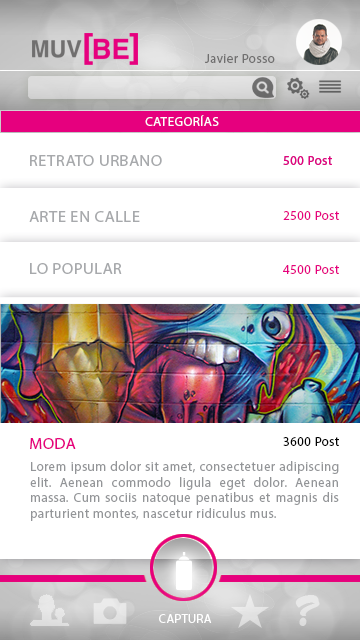
<style>
.page{position:relative;width:360px;height:640px;background:#ffffff}
.page>*{position:absolute;margin:0}
.t1{font:13px "MyriadPro-Regular";letter-spacing:0.035em;color:#706f6f}
.t2{font:13px "MyriadPro-Regular";letter-spacing:0.035em;color:#fdfdfe}
.t3{font:16.1px "MyriadPro-Regular";letter-spacing:0.035em;color:#a7a9ac}
.t4{font:13px "MyriadPro-Regular";letter-spacing:0.035em;color:#e6007e}
.t5{font:16.1px "MyriadPro-Regular";letter-spacing:0.035em;color:#e6007e}
.t6{font:13px "MyriadPro-Regular";letter-spacing:0.035em;color:#020202}
.t7{font:13px "MyriadPro-Regular";letter-spacing:0.035em;color:#939598}
.t8{font:35.4px "CandyScript";letter-spacing:0.035em;color:#ffffff}
.t9{font:12px "MyriadPro-Regular";letter-spacing:0.035em;color:#ffffff;scale:1.03 1}
</style>
<div class="page">
<p class="t1" style="left:205px;top:54px;width:70px;height:9px">Javier Posso</p>
<p class="t2" style="left:145px;top:115px;width:74px;height:11px">CATEGORÍAS</p>
<p class="t3" style="left:30px;top:155px;width:132px;height:11px">RETRATO URBANO</p>
<p class="t3" style="left:29px;top:211px;width:111px;height:11px">ARTE EN CALLE</p>
<p class="t4" style="left:283px;top:211px;width:56px;height:9px">2500 Post</p>
<p class="t3" style="left:30px;top:263px;width:92px;height:11px">LO POPULAR</p>
<p class="t4" style="left:283px;top:265px;width:56px;height:9px">4500 Post</p>
<p class="t5" style="left:30px;top:438px;width:46px;height:11px">MODA</p>
<p class="t6" style="left:283px;top:437px;width:56px;height:9px">3600 Post</p>
<p class="t7" style="left:30px;top:461px;width:309px;height:60px;text-align:justify">Lorem ipsum dolor sit amet, consectetuer adipiscing elit. Aenean commodo ligula eget dolor. Aenean massa. Cum sociis natoque penatibus et magnis dis parturient montes, nascetur ridiculus mus.</p>
<p class="t8" style="left:295px;top:595px;width:25px;height:31px;opacity:0.5">?</p>
<p class="t9" style="left:159px;top:614px;width:53px;height:9px">CAPTURA</p>
</div>
